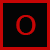
<style>
.page{position:relative;width:50px;height:50px;background:#040404}
.page>*{position:absolute;margin:0}
.t1{font:27.6px "LucidaGrande";color:#c70505}
</style>
<div class="page">
<p class="t1" style="left:16px;top:15px;width:20px;height:20px">O</p>
</div>
